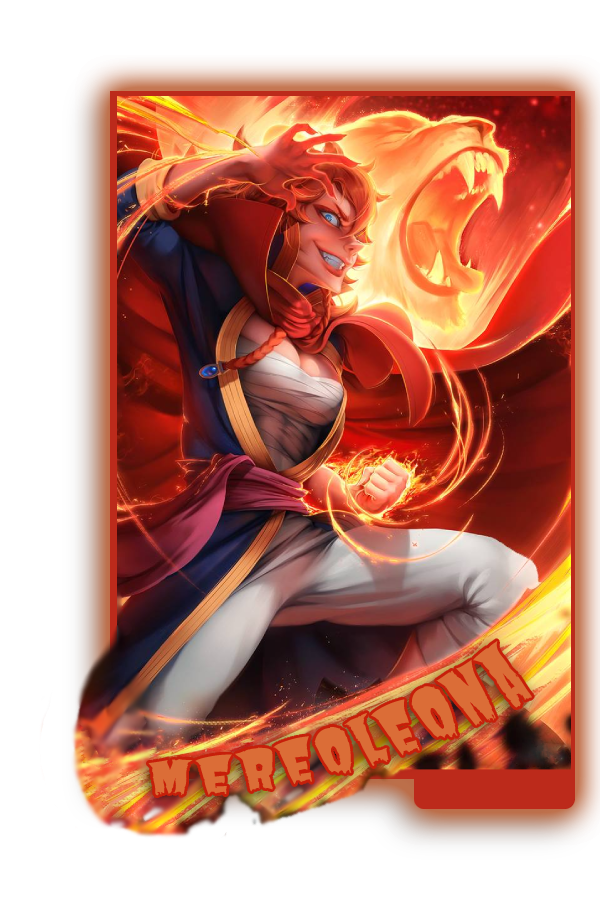
<style>
.page{position:relative;width:600px;height:900px;background:#ffffff}
.page>*{position:absolute;margin:0}
.t1{font:60px "Butcherman-Regular";color:#db6d37}
</style>
<div class="page">
<p class="t1" style="left:148px;top:641px;width:384px;height:155px;rotate:-18deg">Mereoleona</p>
</div>
